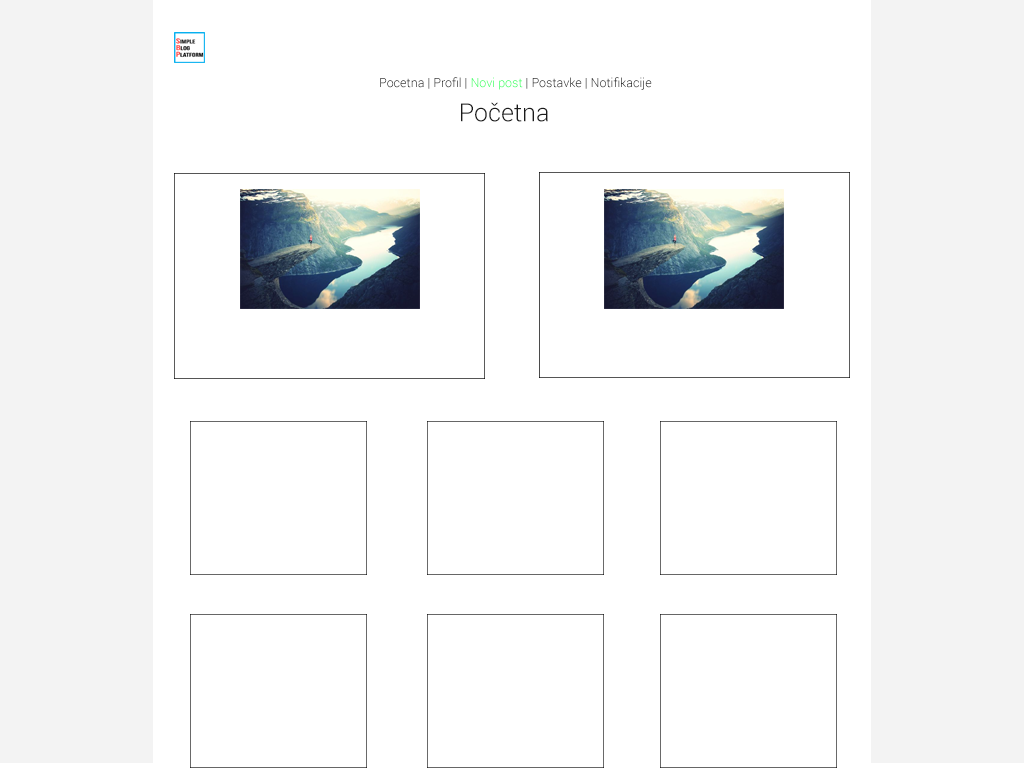
<style>
.page{position:relative;width:1024px;height:768px;background:#ffffff}
.page>*{position:absolute;margin:0}
.t1{font:12.5px "Roboto-Light"}
.t2{font:25px "Roboto-Light";color:#1b1b1b}
</style>
<div class="page">
<p class="t1" style="left:380px;top:77px;width:272px;height:13px">Pocetna | Profil | Novi post | Postavke | Notifikacije</p>
<p class="t2" style="left:461px;top:102px;width:87px;height:20px">Početna</p>
</div>
